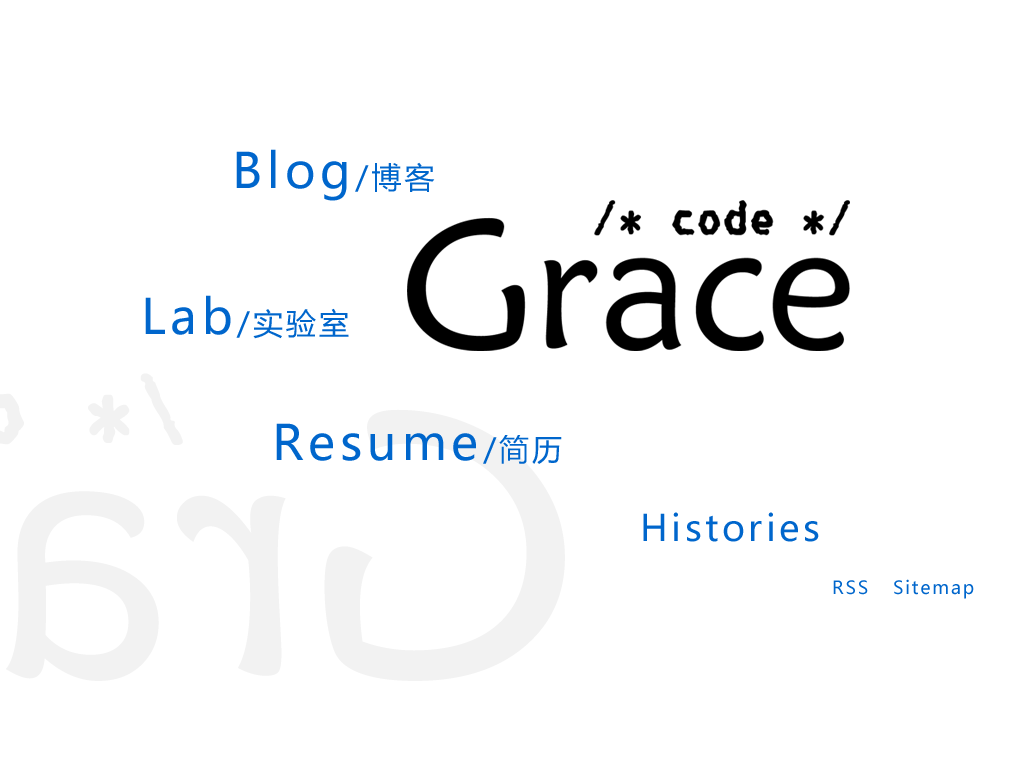
<style>
.page{position:relative;width:1024px;height:768px;background:#ffffff}
.page>*{position:absolute;margin:0}
.t1{font:48px "MicrosoftYaHei";letter-spacing:0.1em;color:#0066cc}
.t2{font:30px "MicrosoftYaHei";letter-spacing:0.1em;color:#0066cc}
.t3{font:36px "MicrosoftYaHei";letter-spacing:0.1em;color:#0066cc}
.t4{font:18px "MicrosoftYaHei";letter-spacing:0.1em;color:#0066cc}
</style>
<div class="page">
<p class="t1" style="left:236px;top:149px;width:199px;height:52px">Blog<span class="t2">/博客</span></p>
<p class="t2" style="left:145px;top:295px;width:204px;height:44px"><span class="t1">Lab</span>/实验室</p>
<p class="t1" style="left:276px;top:423px;width:286px;height:41px">Resume<span class="t2">/简历</span></p>
<p class="t3" style="left:643px;top:512px;width:176px;height:30px">Histories</p>
<p class="t4" style="left:833px;top:580px;width:35px;height:15px">RSS</p>
<p class="t4" style="left:894px;top:579px;width:80px;height:20px">Sitemap</p>
</div>
